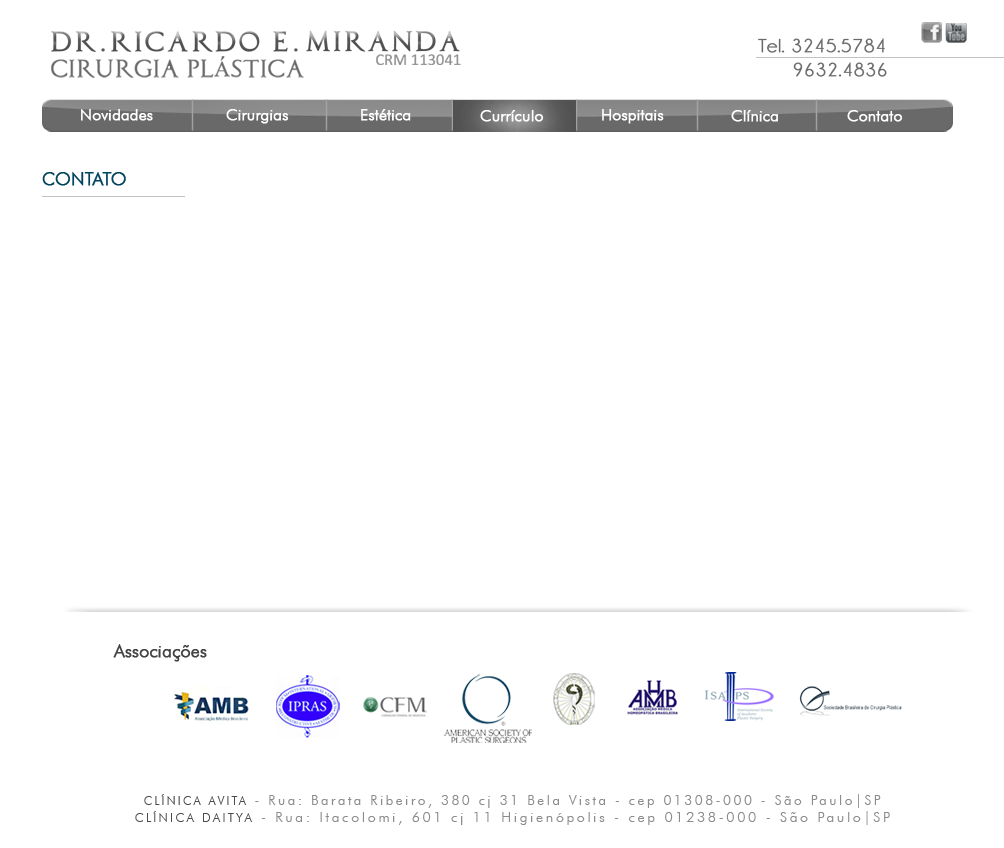
<style>
.page{position:relative;width:1004px;height:848px;background:#ffffff}
.page>*{position:absolute;margin:0}
.t1{font:19px/23.6px "Champagne&Limousines";letter-spacing:0.025em;color:#696969;font-weight:bold;scale:1.05 1}
.t2{font:16px "FuturaBT-Light";letter-spacing:-0.015em;color:#f8f8f8;font-weight:bold}
.t3{font:18px "FuturaBT-Light";letter-spacing:-0.015em;color:#02455e;font-weight:bold}
.t4{font:18px "FuturaBT-Light";letter-spacing:-0.015em;color:#444343;font-weight:bold}
.t5{font:13.7px "FuturaBT-Light";letter-spacing:0.185em;color:#8d8c8c}
.t6{font:11.9px "FuturaBT-Light";letter-spacing:0.185em;color:#4b4b4b}
.t7{font:14.3px "FuturaBT-Light";letter-spacing:0.185em;color:#8d8c8c}
.t8{font:12.4px "FuturaBT-Light";letter-spacing:0.185em;color:#4b4b4b}
</style>
<div class="page">
<p class="t1" style="left:758px;top:38px;width:129px;height:39px;text-align:center">Tel. 3245.5784  <br>      9632.4836</p>
<p class="t2" style="left:81px;top:109px;width:72px;height:12px">Novidades</p>
<p class="t2" style="left:226px;top:109px;width:63px;height:15px">Cirurgias</p>
<p class="t2" style="left:361px;top:109px;width:50px;height:12px">Estética</p>
<p class="t2" style="left:480px;top:110px;width:64px;height:12px">Currículo</p>
<p class="t2" style="left:602px;top:109px;width:62px;height:15px">Hospitais</p>
<p class="t2" style="left:731px;top:110px;width:47px;height:12px">Clínica</p>
<p class="t2" style="left:847px;top:110px;width:56px;height:12px">Contato</p>
<p class="t3" style="left:42px;top:172px;width:84px;height:14px">CONTATO</p>
<p class="t4" style="left:113px;top:644px;width:94px;height:18px">Associações</p>
<p class="t5" style="left:144px;top:794px;width:737px;height:14px"><span class="t6">CLÍNICA AVITA</span> - Rua: Barata Ribeiro, 380 cj 31 Bela Vista - cep 01308-000 - São Paulo|SP</p>
<p class="t7" style="left:135px;top:811px;width:755px;height:14px"><span class="t8">CLÍNICA DAITYA</span> - Rua: Itacolomi, 601 cj 11 Higienópolis - cep 01238-000 - São Paulo|SP</p>
</div>
